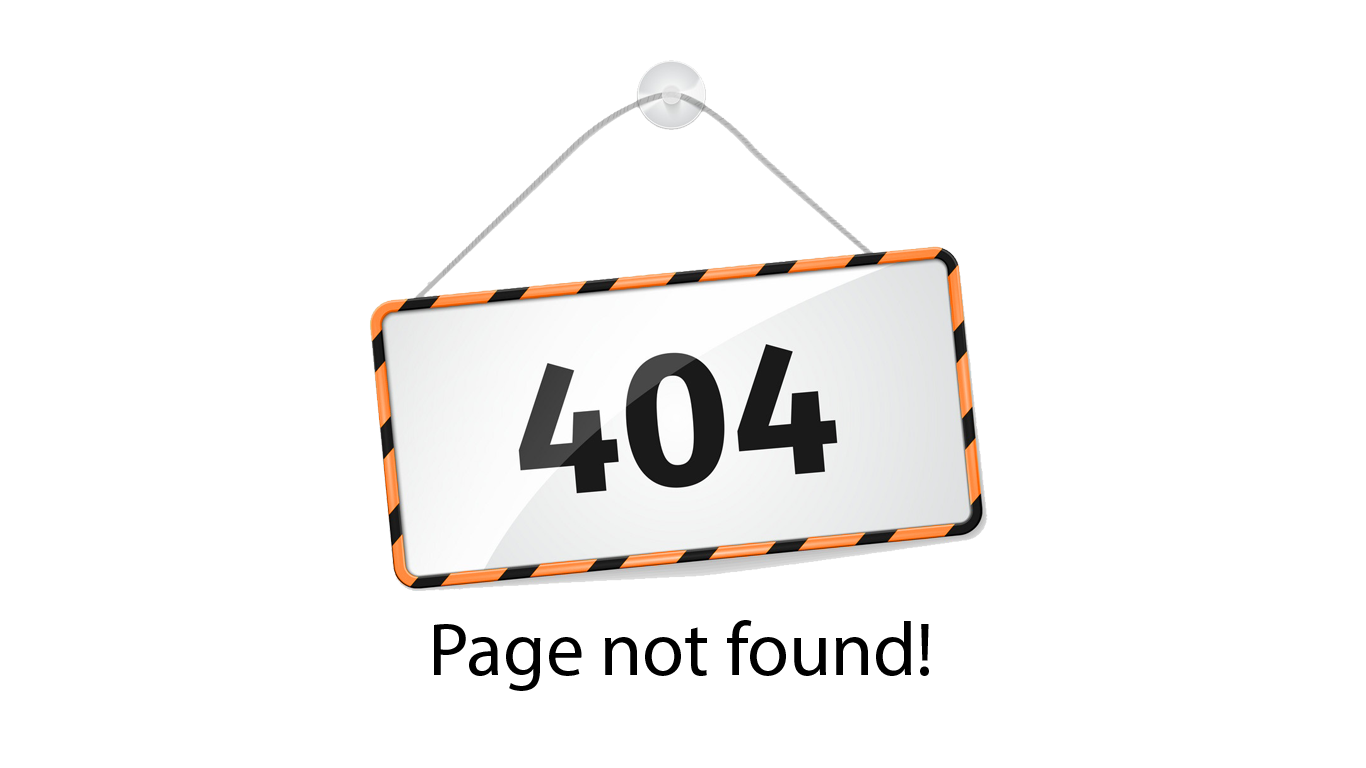
<style>
.page{position:relative;width:1366px;height:768px;background:#ffffff}
.page>*{position:absolute;margin:0}
.t1{font:76.3px "MyriadPro-Regular";color:#000000}
</style>
<div class="page">
<p class="t1" style="left:434px;top:620px;width:495px;height:71px">Page not found!</p>
</div>
